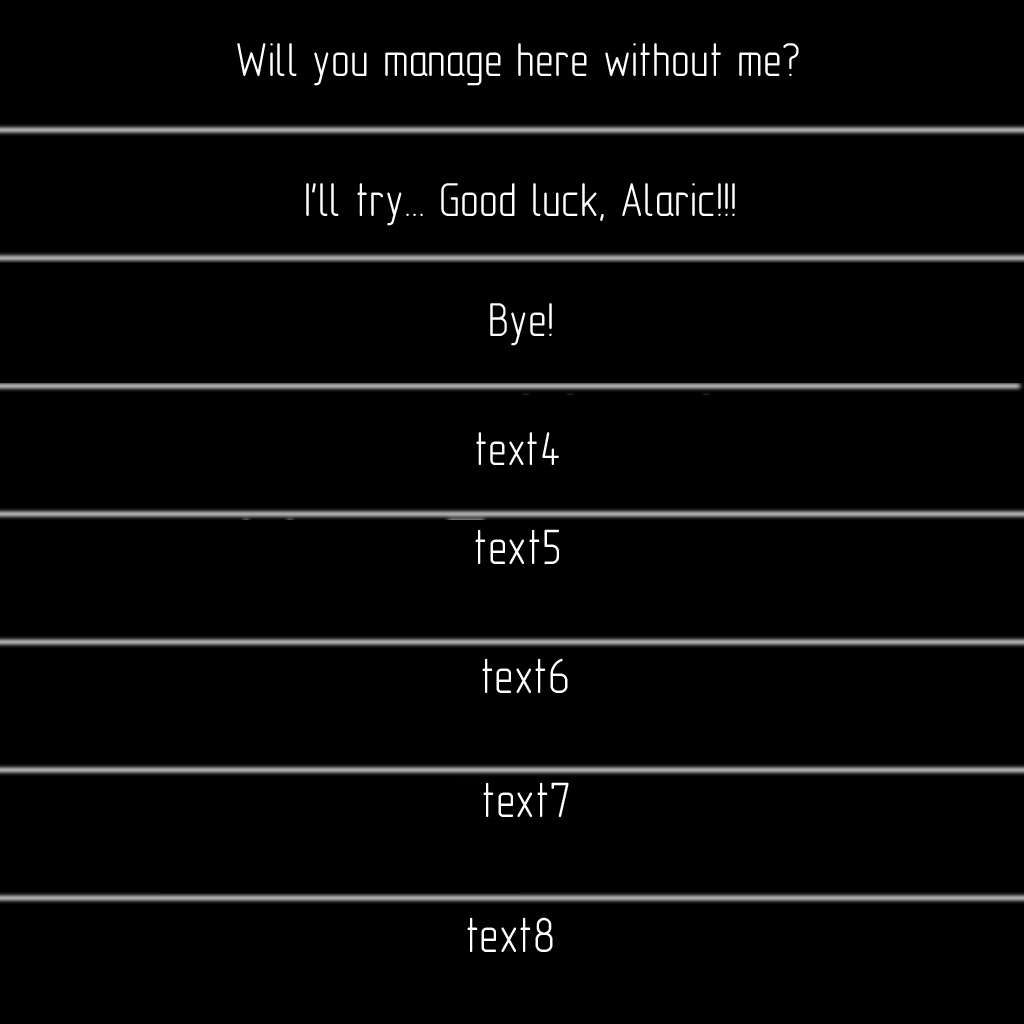
<style>
.page{position:relative;width:1024px;height:1024px;background:#000000}
.page>*{position:absolute;margin:0}
.t1{font:48px "GOST-2.304-81typeA";color:#ffffff}
.t2{font:50px "GOST-2.304-81typeA";color:#ffffff}
</style>
<div class="page">
<p class="t1" style="left:237px;top:43px;width:562px;height:43px">Will you manage here without me?</p>
<p class="t1" style="left:306px;top:183px;width:429px;height:43px">I'll try... Good luck, Alaric!!!</p>
<p class="t1" style="left:490px;top:303px;width:62px;height:43px">Bye!</p>
<p class="t1" style="left:476px;top:432px;width:83px;height:33px">text4</p>
<p class="t2" style="left:475px;top:529px;width:84px;height:35px">text5</p>
<p class="t2" style="left:482px;top:658px;width:86px;height:35px">text6</p>
<p class="t2" style="left:483px;top:782px;width:86px;height:35px">text7</p>
<p class="t2" style="left:467px;top:917px;width:86px;height:35px">text8</p>
</div>
